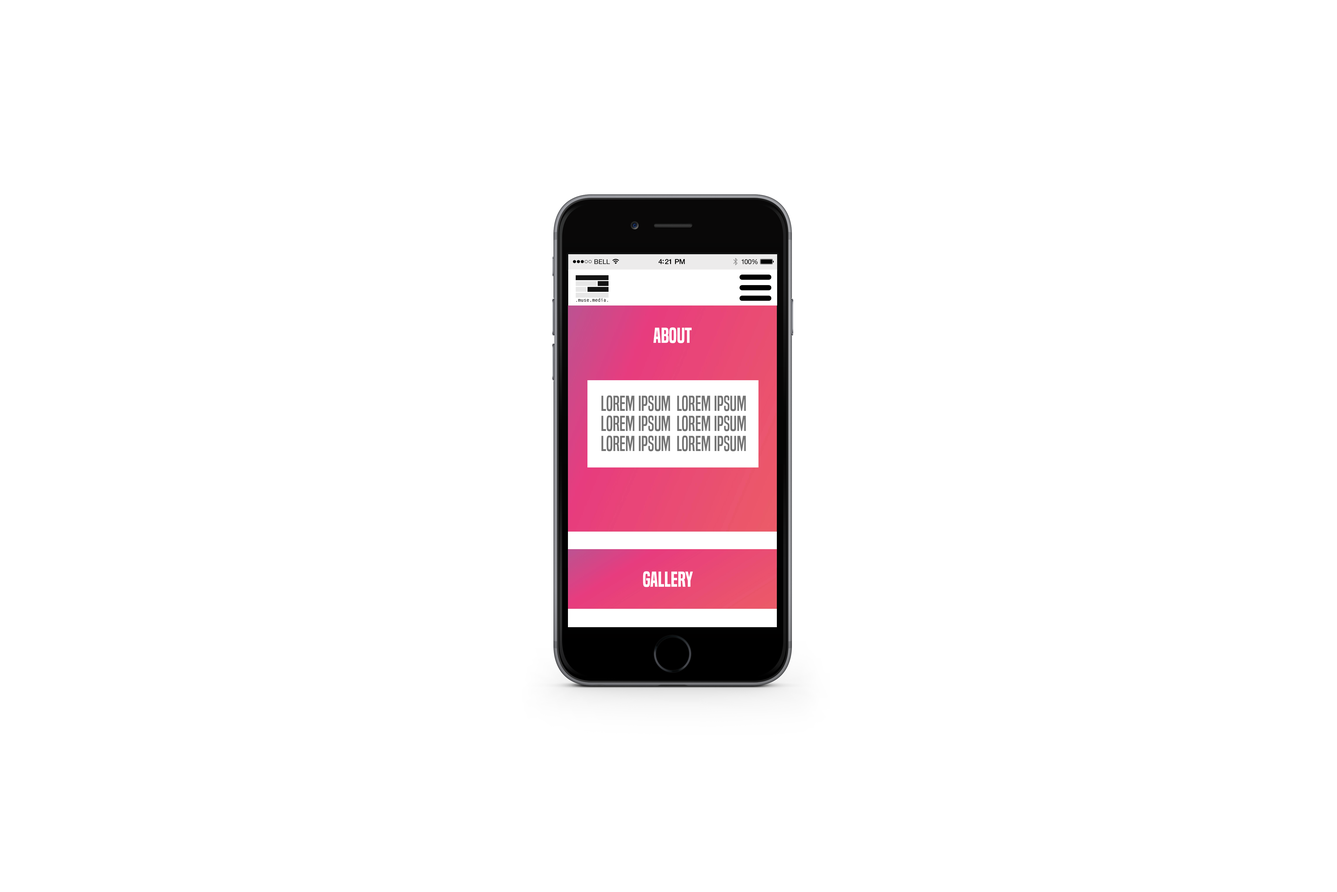
<style>
.page{position:relative;width:1337px;height:892px;background:#ffffff}
.page>*{position:absolute;margin:0}
.t1{font:20.1px "BuiltTitlingSb-Regular";color:#ffffff}
.t2{font:20.1px/6.7px "BuiltTitlingRg-Regular";color:#737373}
</style>
<div class="page">
<p class="t1" style="left:654px;top:327px;width:38px;height:16px">About</p>
<p class="t2" style="left:602px;top:395px;width:144px;height:56px;text-align:center">Lorem Ipsum  Lorem Ipsum<br><br><br>Lorem Ipsum  Lorem Ipsum<br><br><br>Lorem Ipsum  Lorem Ipsum</p>
<p class="t1" style="left:643px;top:571px;width:50px;height:16px">Gallery</p>
</div>
